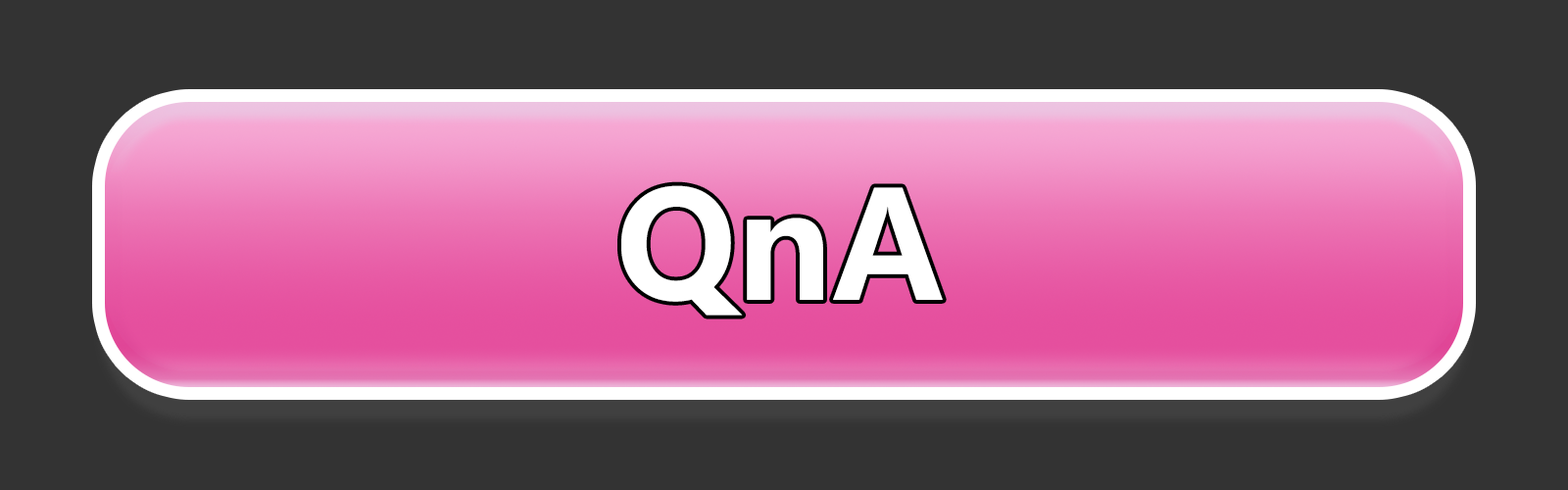
<style>
.page{position:relative;width:1568px;height:490px;background:#333333}
.page>*{position:absolute;margin:0}
.t1{font:148px "MicrosoftYaHei-Bold";color:#ffffff}
</style>
<div class="page">
<p class="t1" style="left:621px;top:185px;width:322px;height:131px">QnA</p>
</div>
